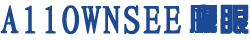
<style>
.page{position:relative;width:250px;height:40px;background:#ffffff}
.page>*{position:absolute;margin:0}
.t1{font:40px "RS_Zhongyi_FT";color:#1b4993;font-weight:bold;scale:0.97 1}
.t2{font:31px "RS_Zhongyi_FT";color:#1b4993;font-weight:bold;scale:0.97 1}
</style>
<div class="page">
<p class="t1" style="left:0px;top:5px;width:181px;height:30px">AllOWNSEE</p>
<p class="t2" style="left:189px;top:4px;width:60px;height:30px">鹰眼</p>
</div>
